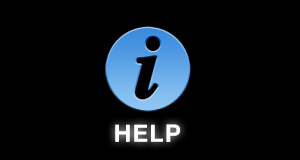
<style>
.page{position:relative;width:300px;height:160px;background:#000000}
.page>*{position:absolute;margin:0}
.t1{font:24px "AlteHaasGrotesk_Bold";letter-spacing:0.05em;color:#ffffff}
</style>
<div class="page">
<p class="t1" style="left:115px;top:124px;width:66px;height:18px">HELP</p>
</div>
